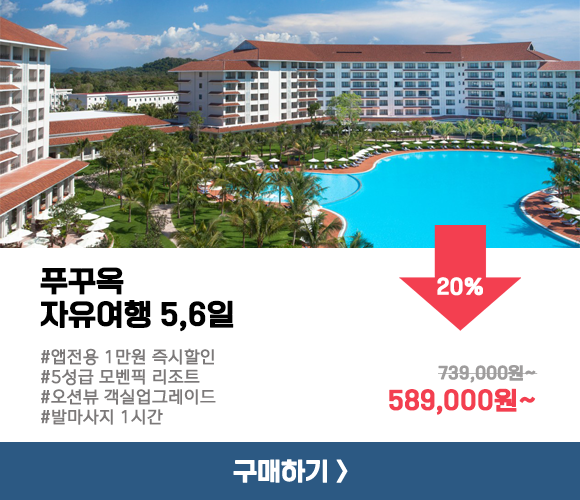
<style>
.page{position:relative;width:580px;height:500px;background:#ffffff}
.page>*{position:absolute;margin:0}
.t1{font:29.2px/33.3px "ONEMobileTitleOTFRegular";letter-spacing:-0.01em;color:#000000;font-weight:bold}
.t2{font:20.8px "ONEMobileTitleOTFRegular";letter-spacing:-0.01em;color:#ffffff;font-weight:bold}
.t3{font:16.7px "ONEMobileOTFRegular";letter-spacing:-0.01em;color:#7c7979;font-weight:bold}
.t4{font:16.7px "ONEMobileTitleOTFRegular";letter-spacing:-0.01em;color:#9f9d9d;font-weight:bold}
.t5{font:25px "ONEMobileTitleOTFRegular";letter-spacing:-0.01em;color:#f33f50;font-weight:bold}
</style>
<div class="page">
<p class="t1" style="left:40px;top:267px;width:194px;height:65px">푸꾸옥<br>자유여행 5,6일</p>
<p class="t2" style="left:437px;top:277px;width:46px;height:19px">20%</p>
<p class="t3" style="left:41px;top:348px;width:175px;height:77px">#앱전용 1만원 즉시할인<br>#5성급 모벤픽 리조트<br>#오션뷰 객실업그레이드<br>#발마사지 1시간</p>
<p class="t4" style="left:438px;top:365px;width:100px;height:18px">739,000원~</p>
<p class="t5" style="left:389px;top:388px;width:147px;height:27px">589,000원~</p>
</div>
